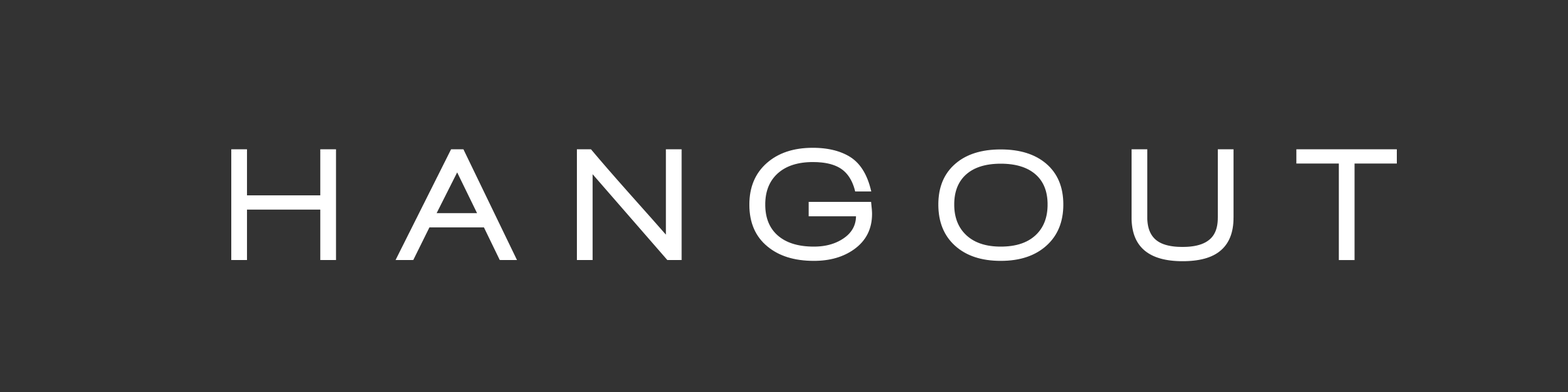
<style>
.page{position:relative;width:1568px;height:392px;background:#333333}
.page>*{position:absolute;margin:0}
.t1{font:163.3px "WalkwayBlack";letter-spacing:0.4em;color:#ffffff}
</style>
<div class="page">
<p class="t1" style="left:231px;top:148px;width:1166px;height:113px">HANGOUT</p>
</div>
